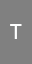
<style>
.page{position:relative;width:32px;height:64px;background:#808080}
.page>*{position:absolute;margin:0}
.t1{font:24px "Calibri";color:#feffff}
</style>
<div class="page">
<p class="t1" style="left:10px;top:24px;width:12px;height:15px">T</p>
</div>
